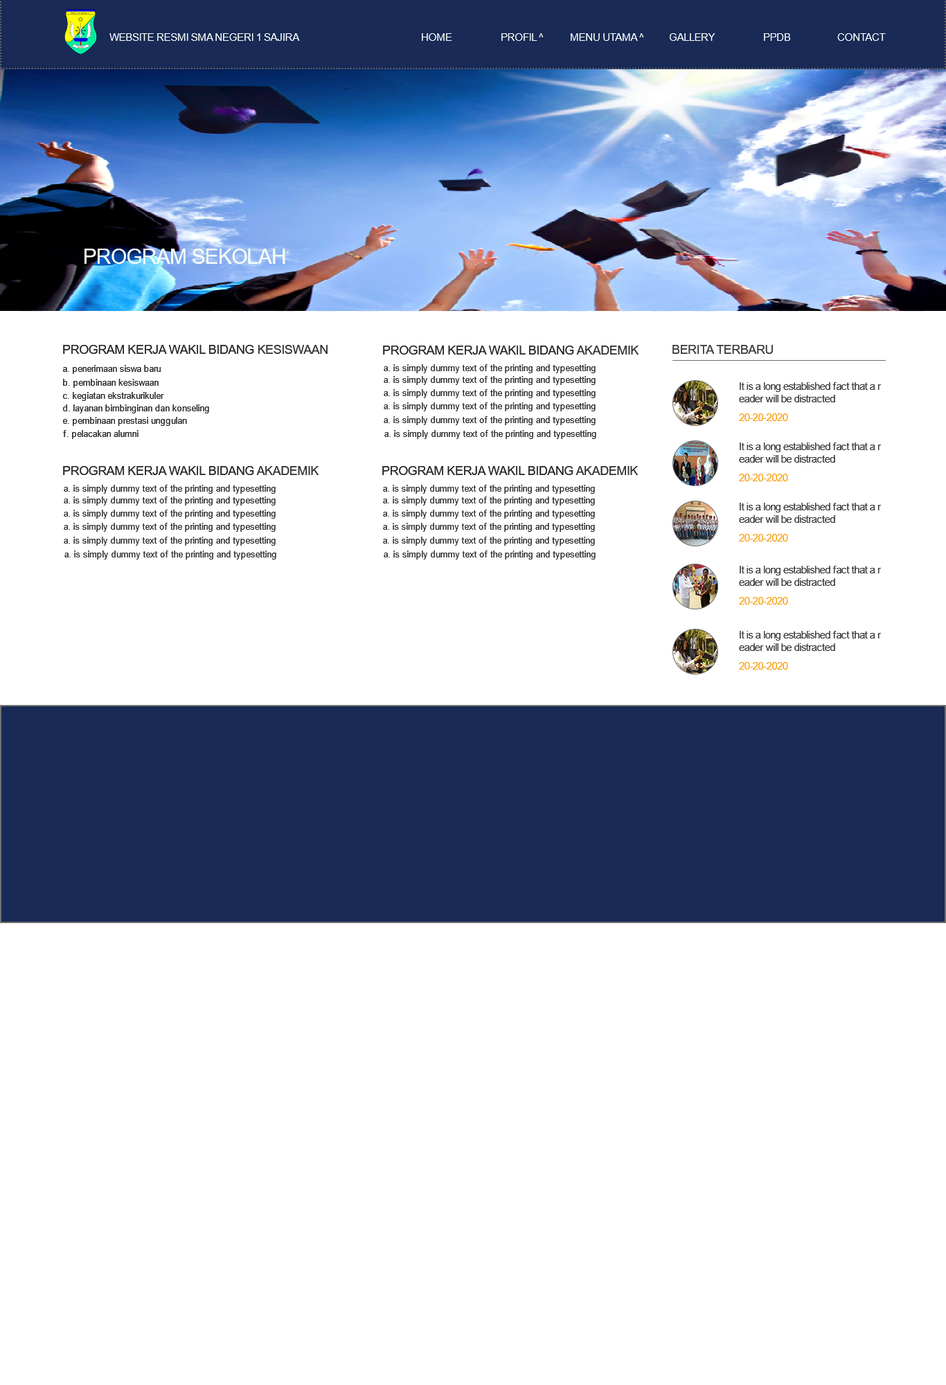
<style>
.page{position:relative;width:946px;height:1385px;background:#ffffff}
.page>*{position:absolute;margin:0}
.t1{font:10.4px "ArialMT";letter-spacing:-0.025em;color:#f7fcf7;text-transform:uppercase}
.t2{font:20.8px "ArialMT";letter-spacing:-0.025em;color:#f7fcf7;text-transform:uppercase}
.t3{font:12.5px "ArialMT";letter-spacing:-0.025em;color:#262726;text-transform:uppercase}
.t4{font:12.5px "ArialMT";letter-spacing:-0.025em;color:#323232;text-transform:uppercase}
.t5{font:12.5px "ArialMT";letter-spacing:-0.025em;color:#393a39;text-transform:uppercase}
.t6{font:9px "ArialMT";letter-spacing:-0.025em;color:#292a29}
.t7{font:9px "ArialMT";letter-spacing:-0.025em;color:#323232}
.t8{font:10.4px/12.5px "ArialMT";letter-spacing:-0.025em;color:#393a39}
.t9{font:10.4px "ArialMT";letter-spacing:-0.025em;color:#f79d0f}
</style>
<div class="page">
<p class="t1" style="left:109px;top:33px;width:191px;height:8px">Website Resmi SMA NEGERI 1 SAJIRA</p>
<p class="t1" style="left:422px;top:33px;width:30px;height:8px">HOME</p>
<p class="t1" style="left:501px;top:33px;width:42px;height:8px">PROFIL ^</p>
<p class="t1" style="left:570px;top:33px;width:74px;height:8px">mENU UTAMA ^</p>
<p class="t1" style="left:669px;top:33px;width:46px;height:8px">GALLERY</p>
<p class="t1" style="left:764px;top:33px;width:26px;height:8px">PPDB</p>
<p class="t1" style="left:837px;top:33px;width:48px;height:8px">CONTACT</p>
<p class="t2" style="left:84px;top:249px;width:201px;height:15px">program sekolah</p>
<p class="t3" style="left:63px;top:345px;width:264px;height:9px">program kerja wakil bidang <span class="t4">kesiswaan</span></p>
<p class="t3" style="left:383px;top:345px;width:256px;height:9px">program kerja wakil bidang <span class="t4">AKADEMIK</span></p>
<p class="t5" style="left:672px;top:345px;width:101px;height:9px">Berita Terbaru</p>
<p class="t6" style="left:63px;top:365px;width:98px;height:9px">a. penerimaan siswa baru</p>
<p class="t7" style="left:384px;top:364px;width:211px;height:9px">a. is simply dummy text of the printing and typesetting</p>
<p class="t7" style="left:384px;top:376px;width:211px;height:9px">a. is simply dummy text of the printing and typesetting</p>
<p class="t6" style="left:63px;top:379px;width:96px;height:9px">b. pembinaan kesiswaan</p>
<p class="t7" style="left:384px;top:389px;width:211px;height:9px">a. is simply dummy text of the printing and typesetting</p>
<p class="t8" style="left:739px;top:382px;width:142px;height:20px">It is a long established fact that a r<br>eader will be distracted</p>
<p class="t6" style="left:63px;top:392px;width:101px;height:9px">c. kegiatan ekstrakurikuler</p>
<p class="t6" style="left:63px;top:404px;width:146px;height:9px">d. layanan bimbinginan dan konseling</p>
<p class="t7" style="left:384px;top:402px;width:211px;height:9px">a. is simply dummy text of the printing and typesetting</p>
<p class="t9" style="left:739px;top:413px;width:49px;height:8px">20-20-2020</p>
<p class="t6" style="left:63px;top:417px;width:124px;height:9px">e. pembinaan prestasi unggulan</p>
<p class="t7" style="left:384px;top:416px;width:211px;height:9px">a. is simply dummy text of the printing and typesetting</p>
<p class="t6" style="left:63px;top:430px;width:75px;height:9px">f. pelacakan alumni</p>
<p class="t7" style="left:384px;top:430px;width:212px;height:9px">a. is simply dummy text of the printing and typesetting</p>
<p class="t8" style="left:739px;top:442px;width:142px;height:20px">It is a long established fact that a r<br>eader will be distracted</p>
<p class="t3" style="left:63px;top:466px;width:256px;height:9px">program kerja wakil bidang <span class="t4">AKADEMIK</span></p>
<p class="t3" style="left:382px;top:466px;width:256px;height:9px">program kerja wakil bidang <span class="t4">AKADEMIK</span></p>
<p class="t9" style="left:739px;top:474px;width:49px;height:7px">20-20-2020</p>
<p class="t7" style="left:64px;top:485px;width:212px;height:9px">a. is simply dummy text of the printing and typesetting</p>
<p class="t7" style="left:383px;top:485px;width:212px;height:9px">a. is simply dummy text of the printing and typesetting</p>
<p class="t7" style="left:64px;top:496px;width:212px;height:9px">a. is simply dummy text of the printing and typesetting</p>
<p class="t7" style="left:383px;top:496px;width:212px;height:9px">a. is simply dummy text of the printing and typesetting</p>
<p class="t7" style="left:64px;top:510px;width:212px;height:9px">a. is simply dummy text of the printing and typesetting</p>
<p class="t7" style="left:383px;top:510px;width:212px;height:9px">a. is simply dummy text of the printing and typesetting</p>
<p class="t8" style="left:739px;top:503px;width:142px;height:20px">It is a long established fact that a r<br>eader will be distracted</p>
<p class="t7" style="left:64px;top:523px;width:212px;height:9px">a. is simply dummy text of the printing and typesetting</p>
<p class="t7" style="left:383px;top:523px;width:212px;height:9px">a. is simply dummy text of the printing and typesetting</p>
<p class="t9" style="left:739px;top:534px;width:49px;height:7px">20-20-2020</p>
<p class="t7" style="left:64px;top:537px;width:212px;height:9px">a. is simply dummy text of the printing and typesetting</p>
<p class="t7" style="left:383px;top:537px;width:212px;height:9px">a. is simply dummy text of the printing and typesetting</p>
<p class="t7" style="left:64px;top:550px;width:212px;height:9px">a. is simply dummy text of the printing and typesetting</p>
<p class="t7" style="left:384px;top:550px;width:211px;height:9px">a. is simply dummy text of the printing and typesetting</p>
<p class="t8" style="left:739px;top:566px;width:142px;height:20px">It is a long established fact that a r<br>eader will be distracted</p>
<p class="t9" style="left:739px;top:597px;width:49px;height:7px">20-20-2020</p>
<p class="t8" style="left:739px;top:631px;width:142px;height:20px">It is a long established fact that a r<br>eader will be distracted</p>
<p class="t9" style="left:739px;top:662px;width:49px;height:7px">20-20-2020</p>
</div>
